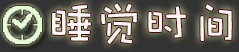
<style>
.page{position:relative;width:239px;height:52px}
.page>*{position:absolute;margin:0}
.t1{font:48px "DFPWaWaW5";color:#fbf4f4}
</style>
<div class="page">
<p class="t1" style="left:52px;top:3px;width:180px;height:41px">睡觉时间</p>
</div>
